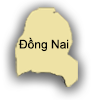
<style>
.page{position:relative;width:100px;height:100px;background:#ffffff}
.page>*{position:absolute;margin:0}
.t1{font:12px "ArialMT";color:#000000}
</style>
<div class="page">
<p class="t1" style="left:18px;top:37px;width:51px;height:15px">Đồng Nai</p>
</div>
